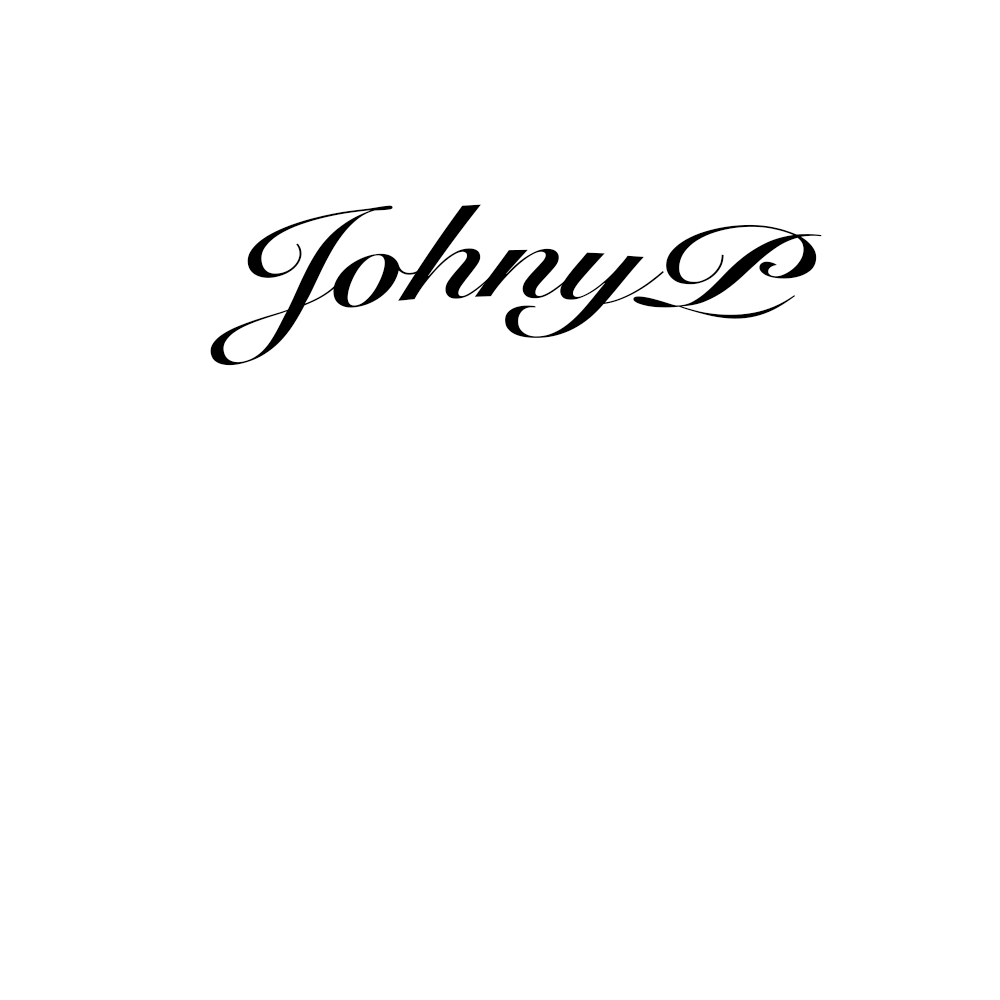
<style>
.page{position:relative;width:1000px;height:1000px;background:#ffffff}
.page>*{position:absolute;margin:0}
.t1{font:132.1px "SnellRoundhand-Bold";color:#000000}
</style>
<div class="page">
<p class="t1" style="left:210px;top:204px;width:612px;height:162px">JohnyP</p>
</div>
